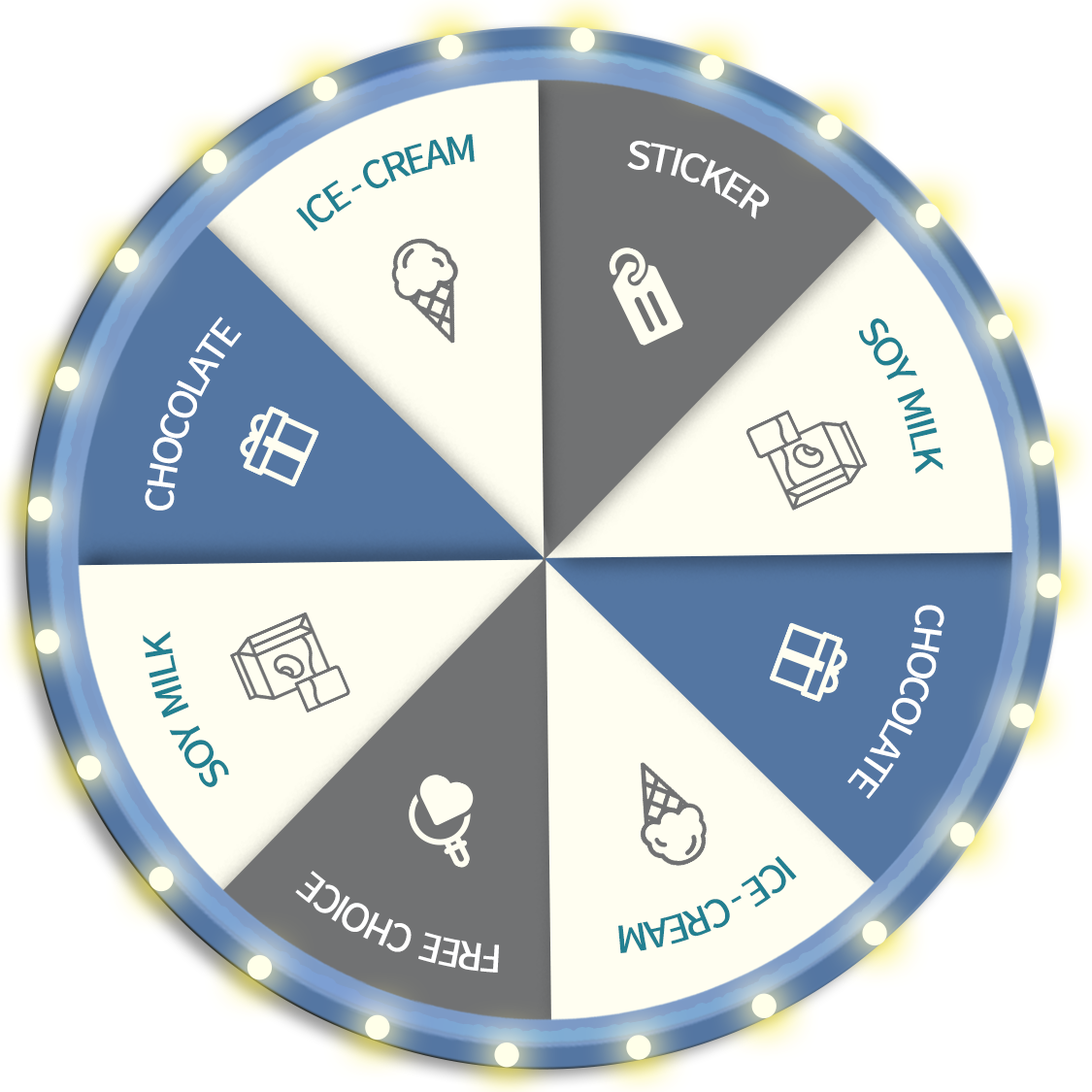
<style>
.page{position:relative;width:1092px;height:1092px;background:#fffef1}
.page>*{position:absolute;margin:0}
.t1{font:37.1px "NotoSansCJKkr-Medium";letter-spacing:-0.075em;color:#238091;scale:0.85 1}
.t2{font:37.2px "NotoSansCJKkr-Medium";letter-spacing:-0.075em;color:#ffffff;scale:0.85 1}
.t3{font:37px "NotoSansCJKkr-Medium";letter-spacing:-0.075em;color:#ffffff;scale:0.85 1}
.t4{font:37px "NotoSansCJKkr-Medium";letter-spacing:-0.075em;color:#238091;scale:0.85 1}
</style>
<div class="page">
<p class="t1" style="left:296px;top:134px;width:179px;height:98px;rotate:-24deg">ICE - CREAM</p>
<p class="t2" style="left:627px;top:141px;width:143px;height:78px;rotate:21deg">STICKER</p>
<p class="t3" style="left:145px;top:316px;width:97px;height:195px;rotate:-69deg">CHOCOLATE</p>
<p class="t4" style="left:859px;top:318px;width:84px;height:157px;rotate:66deg">SOY  MILK</p>
<p class="t3" style="left:847px;top:605px;width:97px;height:194px;rotate:111deg">CHOCOLATE</p>
<p class="t4" style="left:143px;top:631px;width:86px;height:156px;rotate:-114deg">SOY  MILK</p>
<p class="t1" style="left:618px;top:856px;width:179px;height:97px;rotate:156deg">ICE - CREAM</p>
<p class="t2" style="left:295px;top:871px;width:204px;height:102px;rotate:-159deg">FREE  CHOICE</p>
</div>
